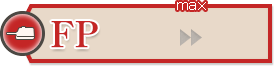
<style>
.page{position:relative;width:274px;height:69px;background:#e8d9c9}
.page>*{position:absolute;margin:0}
.t1{font:36px "RyuminPro-ExBold";color:#c42626}
</style>
<div class="page">
<p class="t1" style="left:51px;top:21px;width:47px;height:27px">FP</p>
</div>
